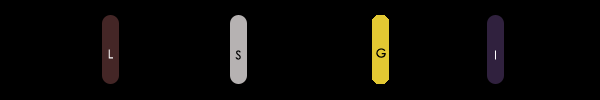
<style>
.page{position:relative;width:600px;height:100px;background:#000000}
.page>*{position:absolute;margin:0}
.t1{font:12px "CenturyGothic";color:#ffffff}
.t2{font:12px "CenturyGothic";color:#000000}
</style>
<div class="page">
<p class="t1" style="left:108px;top:49px;width:5px;height:10px">L</p>
<p class="t2" style="left:235px;top:50px;width:6px;height:10px">S</p>
<p class="t2" style="left:376px;top:48px;width:10px;height:10px">G</p>
<p class="t1" style="left:495px;top:50px;width:1px;height:10px">I</p>
</div>
